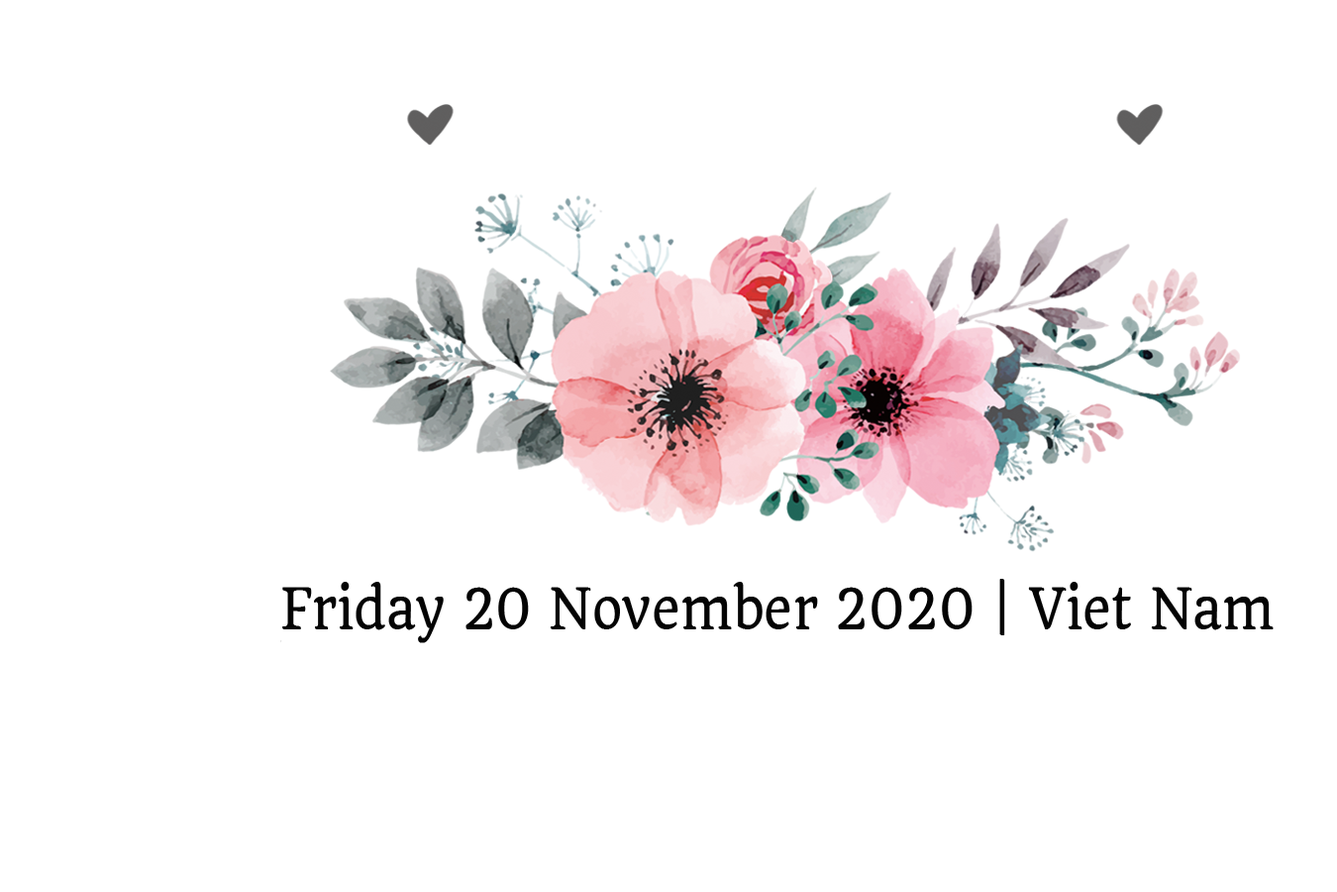
<style>
.page{position:relative;width:1337px;height:892px;background:#ffffff}
.page>*{position:absolute;margin:0}
.t1{font:55.2px "Quando-Regular";color:#040404;scale:0.88 1}
</style>
<div class="page">
<p class="t1" style="left:282px;top:579px;width:992px;height:64px">Friday 20 November 2020 | Viet Nam</p>
</div>
